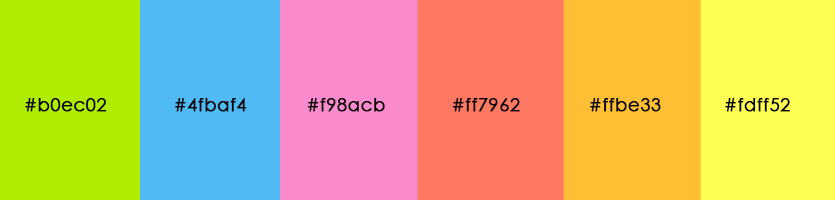
<style>
.page{position:relative;width:835px;height:200px}
.page>*{position:absolute;margin:0}
.t1{font:18px "CenturyGothic";letter-spacing:0.01em;color:#000000;font-weight:bold}
</style>
<div class="page">
<p class="t1" style="left:25px;top:98px;width:82px;height:14px">#b0ec02</p>
<p class="t1" style="left:175px;top:98px;width:72px;height:14px">#4fbaf4</p>
<p class="t1" style="left:307px;top:98px;width:78px;height:14px">#f98acb</p>
<p class="t1" style="left:453px;top:98px;width:67px;height:14px">#ff7962</p>
<p class="t1" style="left:590px;top:98px;width:71px;height:14px">#ffbe33</p>
<p class="t1" style="left:725px;top:98px;width:65px;height:14px">#fdff52</p>
</div>
